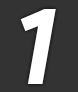
<style>
.page{position:relative;width:78px;height:92px;background:#333333}
.page>*{position:absolute;margin:0}
.t1{font:109.6px "ProductSans-BoldItalic";color:#ffffff}
</style>
<div class="page">
<p class="t1" style="left:20px;top:9px;width:36px;height:75px">1</p>
</div>
